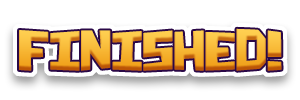
<style>
.page{position:relative;width:300px;height:100px;background:#ffffff}
.page>*{position:absolute;margin:0}
.t1{font:57.5px "Chunq";scale:0.95 1}
</style>
<div class="page">
<p class="t1" style="left:19px;top:28px;width:263px;height:43px">FINISHED!</p>
</div>
